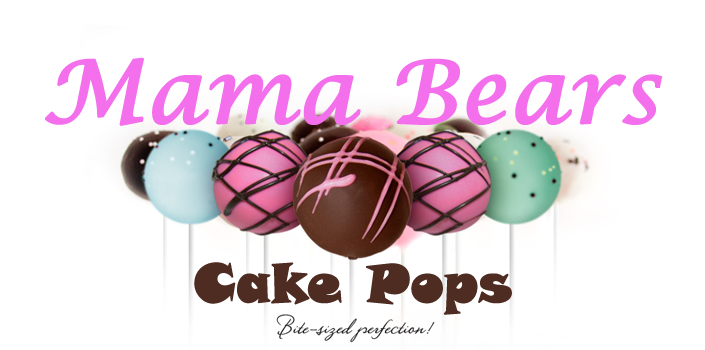
<style>
.page{position:relative;width:705px;height:350px;background:#ffffff}
.page>*{position:absolute;margin:0}
.t1{font:86.8px "LucidaCalligraphy-Italic";color:#f46fec;font-weight:bold}
.t2{font:52.9px "SnapITC-Regular";color:#4e2c22;font-weight:bold}
</style>
<div class="page">
<p class="t1" style="left:45px;top:57px;width:618px;height:69px">Mama Bears</p>
<p class="t2" style="left:194px;top:262px;width:318px;height:53px">Cake Pops</p>
</div>
